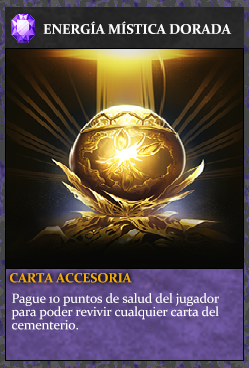
<style>
.page{position:relative;width:249px;height:368px}
.page>*{position:absolute;margin:0}
.t1{font:14px "Constantia-Bold";letter-spacing:-0.02em;color:#ffffff}
.t2{font:13.3px "Constantia-Bold";letter-spacing:-0.02em;color:#f2ac05}
.t3{font:13.3px/13.3px "Constantia";letter-spacing:-0.02em;color:#ffffff}
</style>
<div class="page">
<p class="t1" style="left:43px;top:21px;width:189px;height:13px">ENERGÍA MÍSTICA DORADA</p>
<p class="t2" style="left:10px;top:273px;width:122px;height:10px">CARTA ACCESORIA</p>
<p class="t3" style="left:11px;top:293px;width:208px;height:37px">Pague 10 puntos de salud del jugador<br>para poder revivir cualquier carta del<br>cementerio.</p>
</div>
